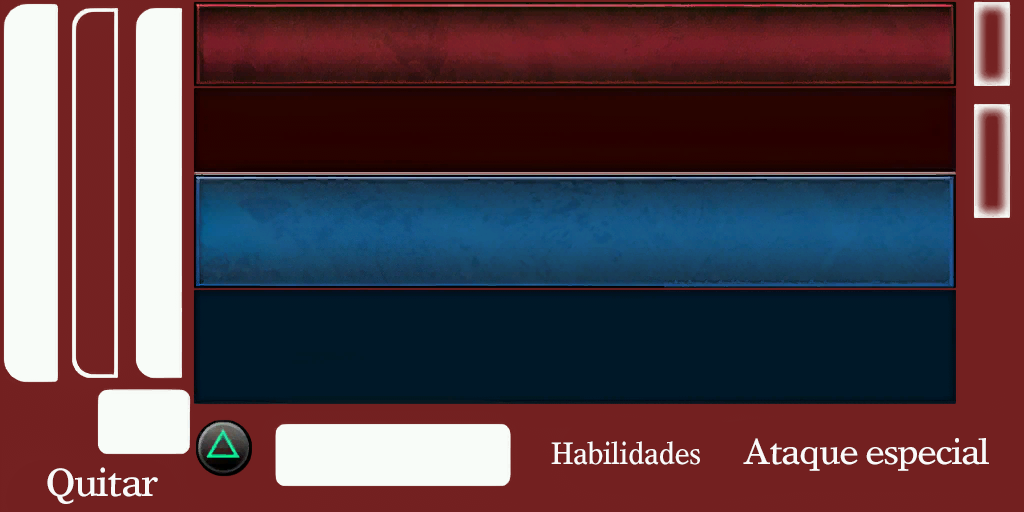
<style>
.page{position:relative;width:1024px;height:512px}
.page>*{position:absolute;margin:0}
.t1{font:35.7px "TimesEuropaLTStd-Roman";letter-spacing:-0.05em;color:#fafafa}
.t2{font:31px "TimesEuropaLTStd-Roman";letter-spacing:-0.02em;color:#fafafa;scale:0.87 1}
.t3{font:39.5px "TimesEuropaLTStd-Roman";letter-spacing:-0.05em;color:#fafafa}
</style>
<div class="page">
<p class="t1" style="left:743px;top:438px;width:246px;height:33px">Ataque especial</p>
<p class="t2" style="left:551px;top:441px;width:149px;height:24px">Habilidades</p>
<p class="t3" style="left:47px;top:467px;width:111px;height:37px">Quitar</p>
</div>
